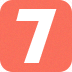
<style>
.page{position:relative;width:72px;height:72px;background:#ffffff}
.page>*{position:absolute;margin:0}
.t1{font:80px "Mouser";letter-spacing:0.025em;color:#ffffff}
</style>
<div class="page">
<p class="t1" style="left:16px;top:9px;width:41px;height:54px">7</p>
</div>
